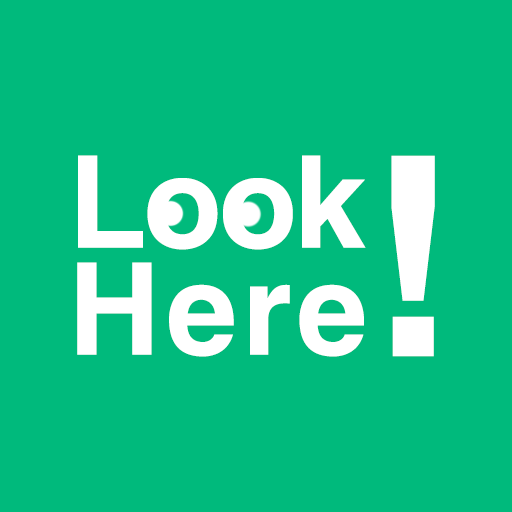
<style>
.page{position:relative;width:512px;height:512px;background:#00ba7c}
.page>*{position:absolute;margin:0}
.t1{font:128px/107px "Helvetica-Bold";letter-spacing:-0.005em;color:#ffffff}
.t2{font:128px/107px "Helvetica-Bold";letter-spacing:0.05em;color:#ffffff}
.t3{font:279px "Helvetica-Bold";color:#ffffff}
</style>
<div class="page">
<p class="t1" style="left:77px;top:155px;width:289px;height:202px">Look<br><span class="t2">Here</span></p>
<p class="t3" style="left:391px;top:155px;width:44px;height:202px">!</p>
</div>
